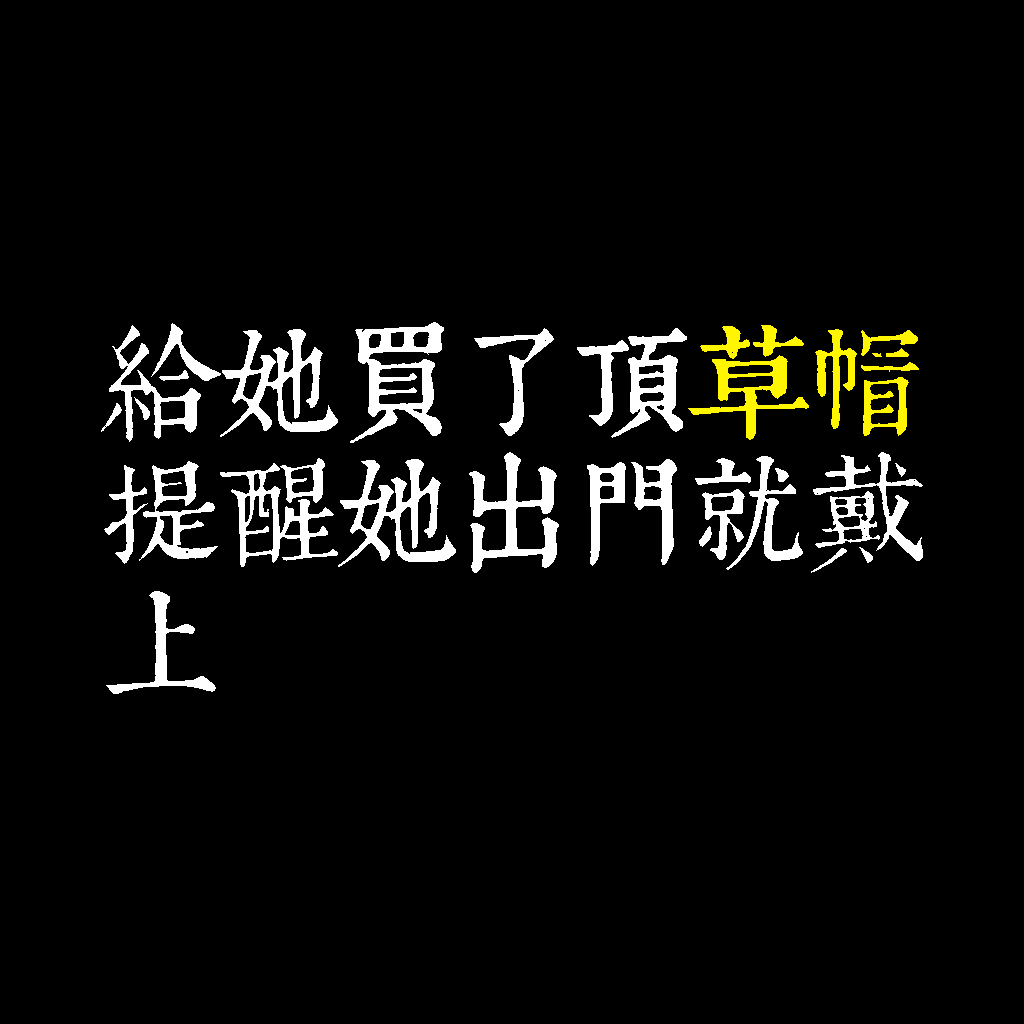
<style>
.page{position:relative;width:1024px;height:1024px;background:#000000}
.page>*{position:absolute;margin:0}
.t1{font:120px/130px "TpldKhangXiDictTrial";letter-spacing:-0.02em;color:#ffffff}
.t2{font:120px/130px "TpldKhangXiDictTrial";letter-spacing:-0.02em;color:#fff600}
</style>
<div class="page">
<p class="t1" style="left:101px;top:322px;width:822px;height:372px">給她買了頂<span class="t2">草帽<br></span>提醒她出門就戴<br>上</p>
</div>
